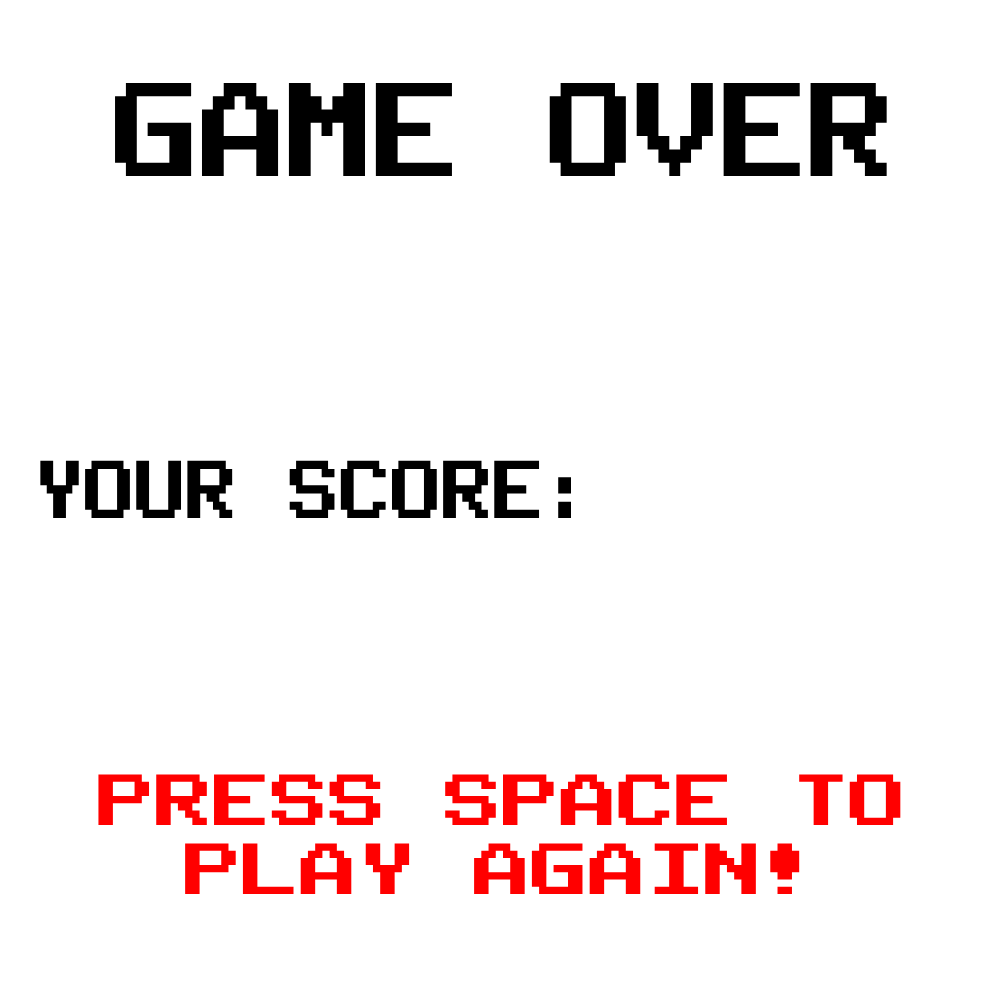
<style>
.page{position:relative;width:1000px;height:1000px;background:#ffffff}
.page>*{position:absolute;margin:0}
.t1{font:106.4px "PublicPixel";color:#000000;scale:0.82 1}
.t2{font:65.3px "PublicPixel";color:#000000;scale:0.78 1}
.t3{font:57.8px "PublicPixel";color:#ff0000}
</style>
<div class="page">
<p class="t1" style="left:115px;top:82px;width:772px;height:94px">GAME OVER</p>
<p class="t2" style="left:40px;top:460px;width:531px;height:58px">YOUR SCORE:</p>
<p class="t3" style="left:98px;top:774px;width:803px;height:120px;text-align:center">PRESS SPACE TO<br>PLAY AGAIN!</p>
</div>
